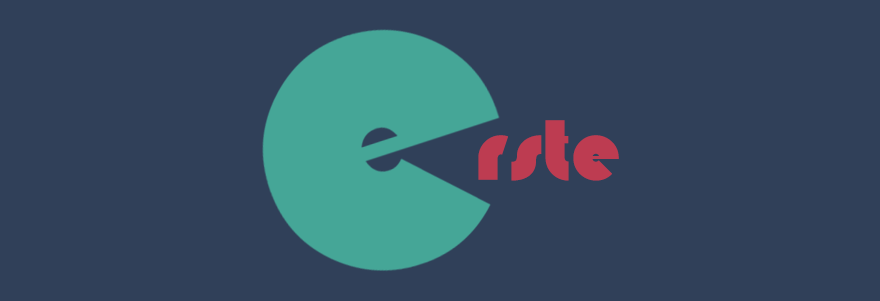
<style>
.page{position:relative;width:880px;height:301px;background:#304059}
.page>*{position:absolute;margin:0}
.t1{font:75px "KnuckleDown";letter-spacing:0.02em;color:#bd3c51}
</style>
<div class="page">
<p class="t1" style="left:478px;top:120px;width:141px;height:61px">rste</p>
</div>
